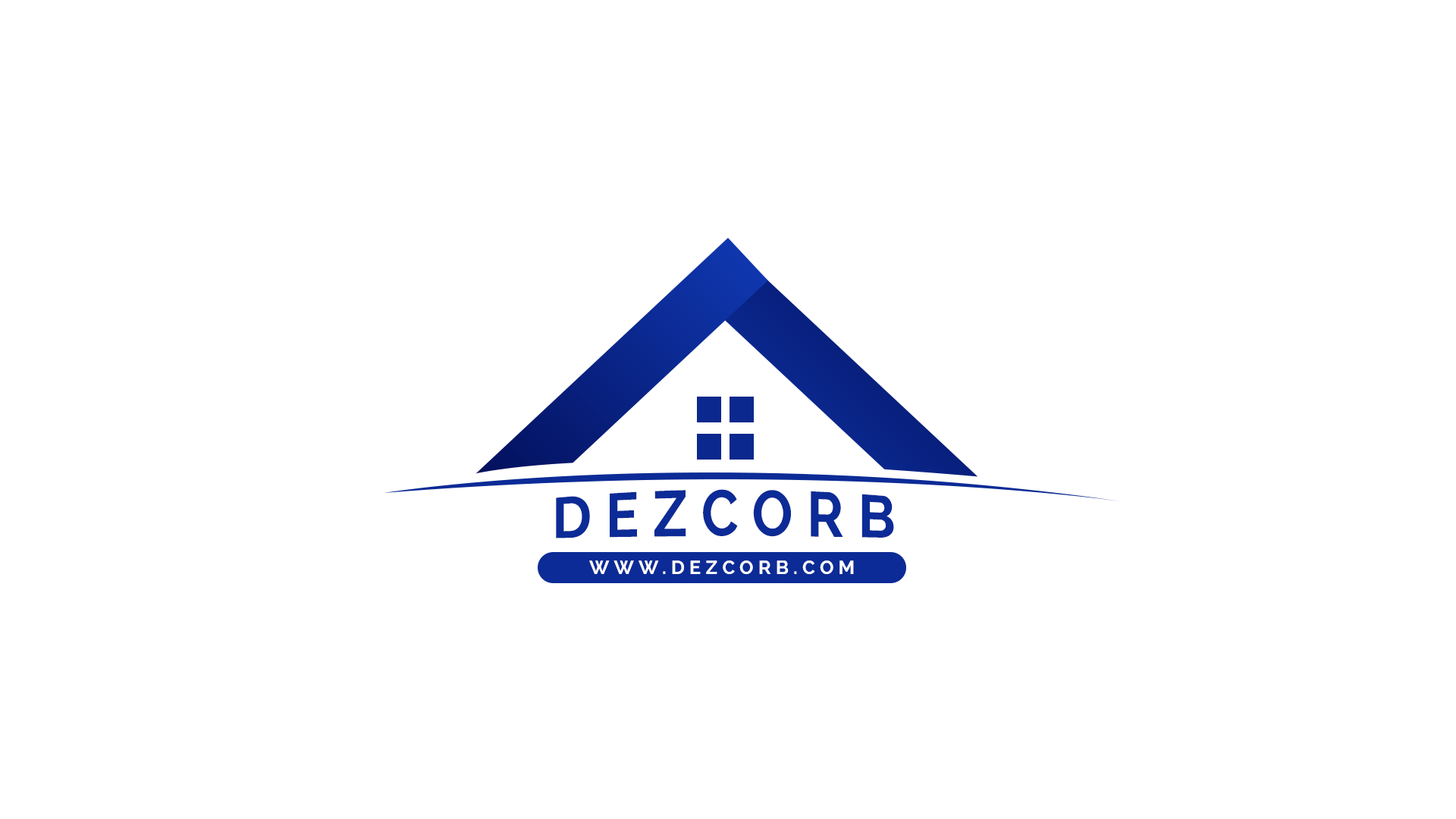
<style>
.page{position:relative;width:1456px;height:819px;background:#ffffff}
.page>*{position:absolute;margin:0}
.t1{font:55.4px "Raleway-Bold";letter-spacing:0.25em;color:#0c2b96}
.t2{font:19px "Raleway-Bold";letter-spacing:0.25em;color:#ffffff}
</style>
<div class="page">
<p class="t1" style="left:556px;top:489px;width:338px;height:49px">DEZCORB</p>
<p class="t2" style="left:589px;top:560px;width:265px;height:15px">WWW.DEZCORB.COM</p>
</div>
